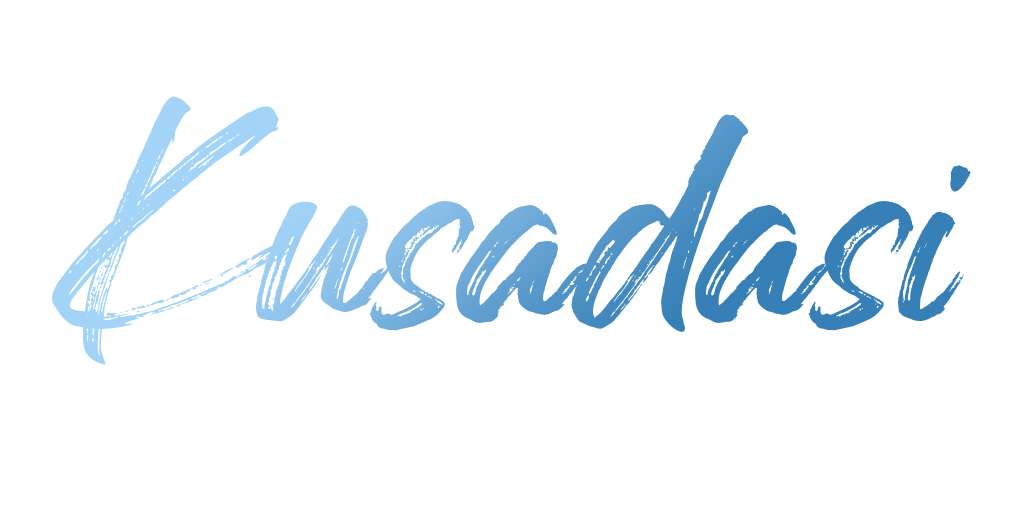
<style>
.page{position:relative;width:1024px;height:512px;background:#ffffff}
.page>*{position:absolute;margin:0}
.t1{font:250px "GeorgiaBrush";letter-spacing:0.01em}
</style>
<div class="page">
<p class="t1" style="left:52px;top:96px;width:919px;height:269px">Kusadasi</p>
</div>
